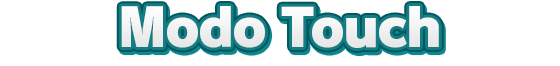
<style>
.page{position:relative;width:560px;height:66px;background:#ffffff}
.page>*{position:absolute;margin:0}
.t1{font:52px "RodinPro-UB";letter-spacing:-0.039em;color:#f1f1f2}
</style>
<div class="page">
<p class="t1" style="left:121px;top:6px;width:318px;height:42px">Modo Touch</p>
</div>
